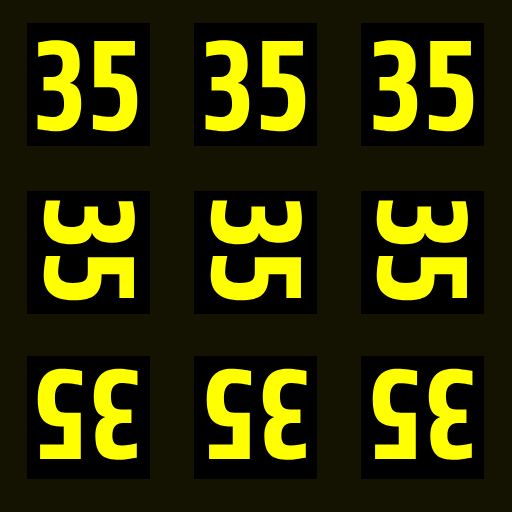
<style>
.page{position:relative;width:512px;height:512px;background:#141301}
.page>*{position:absolute;margin:0}
.t1{font:130px "Share-BoldOSF";color:#ffff00}
</style>
<div class="page">
<p class="t1" style="left:37px;top:40px;width:101px;height:92px">35</p>
<p class="t1" style="left:205px;top:40px;width:101px;height:92px">35</p>
<p class="t1" style="left:373px;top:40px;width:101px;height:92px">35</p>
<p class="t1" style="left:43px;top:200px;width:92px;height:101px;rotate:90deg">35</p>
<p class="t1" style="left:210px;top:200px;width:92px;height:101px;rotate:90deg">35</p>
<p class="t1" style="left:376px;top:200px;width:92px;height:101px;rotate:90deg">35</p>
<p class="t1" style="left:37px;top:368px;width:101px;height:92px;rotate:-180deg">35</p>
<p class="t1" style="left:206px;top:368px;width:101px;height:92px;rotate:-180deg">35</p>
<p class="t1" style="left:372px;top:368px;width:101px;height:92px;rotate:-180deg">35</p>
</div>
